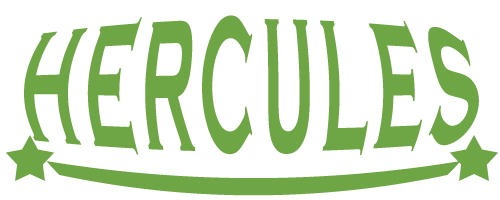
<style>
.page{position:relative;width:500px;height:200px;background:#ffffff}
.page>*{position:absolute;margin:0}
.t1{font:160px "CopperplateGothic-Bold";letter-spacing:0.1em;color:#6ea646;text-decoration:underline;scale:0.33 1}
</style>
<div class="page">
<p class="t1" style="left:24px;top:15px;width:455px;height:181px">HERCULES</p>
</div>
